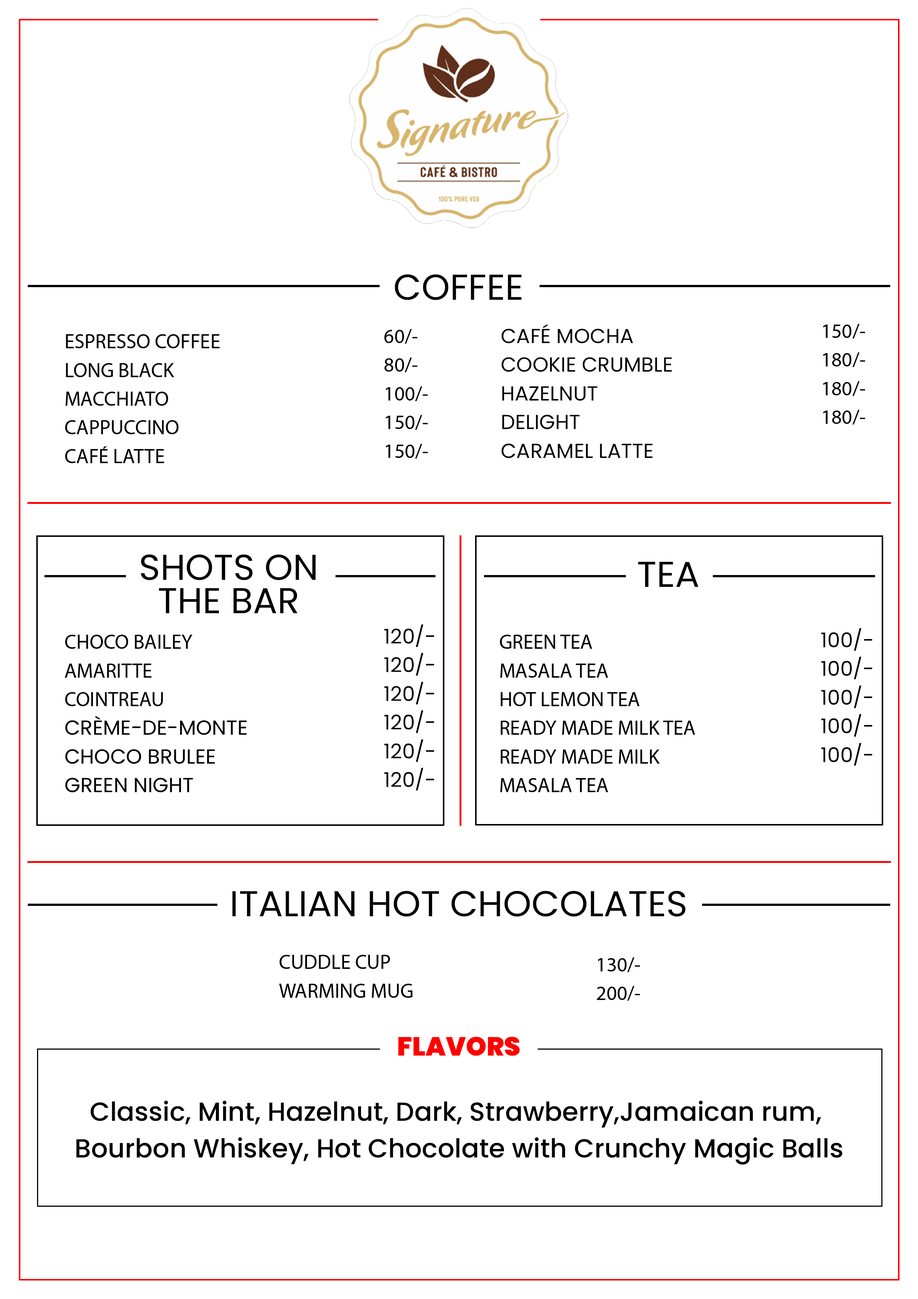
<style>
.page{position:relative;width:918px;height:1299px;background:#ffffff}
.page>*{position:absolute;margin:0}
.t1{font:35.9px "Poppins-Regular";color:#000000;text-transform:uppercase}
.t2{font:20.4px/28.7px "Poppins-Regular";color:#000000}
.t3{font:35.9px/33.3px "Poppins-Regular";color:#000000;text-transform:uppercase}
.t4{font:26.2px "Poppins-Black";color:#ff0000;text-transform:uppercase}
.t5{font:26.2px/36.9px "Poppins-Medium";color:#000000}
</style>
<div class="page">
<p class="t1" style="left:395px;top:274px;width:127px;height:26px">Coffee</p>
<p class="t2" style="left:384px;top:329px;width:44px;height:130px">60/-<br>80/-<br>100/-<br>150/-<br>150/-</p>
<p class="t2" style="left:502px;top:324px;width:170px;height:134px">CAFÉ MOCHA<br>COOKIE CRUMBLE<br>HAZELNUT<br>DELIGHT<br>CARAMEL LATTE</p>
<p class="t2" style="left:823px;top:324px;width:42px;height:100px">150/-<br>180/-<br>180/-<br>180/-</p>
<p class="t2" style="left:65px;top:334px;width:155px;height:129px">ESPRESSO COFFEE<br>LONG BLACK<br>MACCHIATO<br>CAPPUCCINO<br>CAFÉ LATTE</p>
<p class="t3" style="left:141px;top:554px;width:175px;height:59px;text-align:center">Shots on<br>the Bar</p>
<p class="t1" style="left:638px;top:562px;width:61px;height:25px">TEA</p>
<p class="t2" style="left:384px;top:624px;width:50px;height:166px">120/-<br>120/-<br>120/-<br>120/-<br>120/-<br>120/-</p>
<p class="t2" style="left:822px;top:628px;width:51px;height:138px">100/-<br>100/-<br>100/-<br>100/-<br>100/-</p>
<p class="t2" style="left:65px;top:634px;width:182px;height:158px">CHOCO BAILEY<br>AMARITTE<br>COINTREAU<br>CRÈME-DE-MONTE<br>CHOCO BRULEE<br>GREEN NIGHT</p>
<p class="t2" style="left:500px;top:634px;width:195px;height:158px">GREEN TEA<br>MASALA TEA<br>HOT LEMON TEA<br>READY MADE MILK TEA<br>READY MADE MILK<br>MASALA TEA</p>
<p class="t1" style="left:232px;top:890px;width:454px;height:26px">ITALIAN HOT CHOCOLATES</p>
<p class="t2" style="left:279px;top:955px;width:134px;height:42px">CUDDLE CUP<br>WARMING MUG</p>
<p class="t2" style="left:597px;top:957px;width:43px;height:43px">130/-<br>200/-</p>
<p class="t4" style="left:398px;top:1036px;width:122px;height:20px">Flavors</p>
<p class="t5" style="left:76px;top:1100px;width:767px;height:65px;text-align:center">Classic, Mint, Hazelnut, Dark, Strawberry,Jamaican rum, <br>Bourbon Whiskey, Hot Chocolate with Crunchy Magic Balls</p>
</div>
